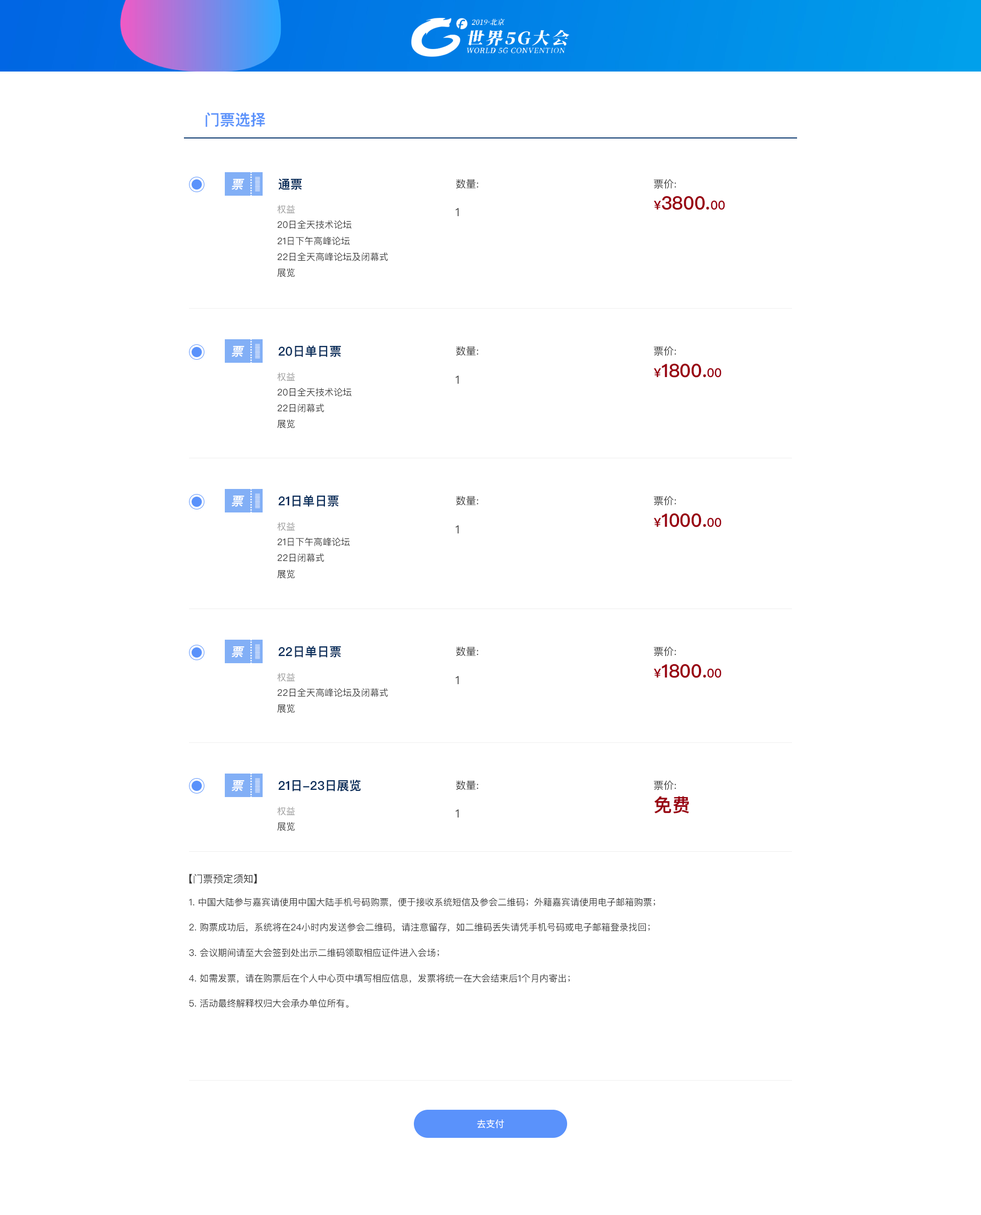
<style>
.page{position:relative;width:981px;height:1215px;background:#ffffff}
.page>*{position:absolute;margin:0}
.t1{font:15.3px "PingFangSC-Semibold";color:#5a92fb;text-transform:uppercase}
.t2{font:12.3px "PingFangSC-Semibold";color:#ffffff;text-transform:uppercase;font-style:italic}
.t3{font:4.7px/9.4px "PingFangSC-Regular";text-transform:uppercase;scale:0.97 1}
.t4{font:12.3px "PingFangSC-Semibold";color:#0a2e5b;text-transform:uppercase}
.t5{font:10.2px "PingFangSC-Regular";color:#333333;text-transform:uppercase}
.t6{font:18.4px "PingFangSC-Semibold";color:#990010;text-transform:uppercase}
.t7{font:12.2px "PingFangSC-Semibold";color:#990010;text-transform:uppercase}
.t8{font:12.3px "PingFangSC-Semibold";color:#990010;text-transform:uppercase}
.t9{font:9.2px "PingFangSC-Regular";color:#999999;text-transform:uppercase}
.t10{font:11.2px "PingFangSC-Regular";color:#333333;text-transform:uppercase}
.t11{font:9.2px/16px "PingFangSC-Regular";color:#333333;text-transform:uppercase}
.t12{font:11.3px "PingFangSC-Regular";color:#333333;text-transform:uppercase}
.t13{font:9.2px "PingFangSC-Regular";color:#333333;text-transform:uppercase}
.t14{font:9.2px/25.4px "PingFangSC-Regular";color:#333333;text-transform:uppercase}
.t15{font:9.2px "PingFangSC-Regular";color:#ffffff}
</style>
<div class="page">
<p class="t1" style="left:205px;top:112px;width:60px;height:15px">门票选择</p>
<p class="t2" style="left:232px;top:179px;width:12px;height:11px">票</p>
<p class="t3" style="left:255px;top:177px;width:5px;height:15px">||||||||||||||||</p>
<p class="t4" style="left:279px;top:178px;width:23px;height:12px">通票</p>
<p class="t5" style="left:456px;top:179px;width:22px;height:10px">数量:</p>
<p class="t5" style="left:654px;top:179px;width:22px;height:10px">票价:</p>
<p class="t6" style="left:654px;top:196px;width:71px;height:14px"><span class="t7">¥</span>3800.<span class="t8">00</span></p>
<p class="t9" style="left:277px;top:205px;width:18px;height:9px">权益</p>
<p class="t10" style="left:455px;top:208px;width:4px;height:8px">1</p>
<p class="t11" style="left:277px;top:220px;width:111px;height:57px">20日全天技术论坛<br>21日下午高峰论坛<br>22日全天高峰论坛及闭幕式<br>展览</p>
<p class="t2" style="left:232px;top:346px;width:12px;height:11px">票</p>
<p class="t3" style="left:255px;top:344px;width:5px;height:15px">||||||||||||||||</p>
<p class="t4" style="left:279px;top:345px;width:62px;height:12px">20日单日票</p>
<p class="t5" style="left:456px;top:346px;width:22px;height:10px">数量:</p>
<p class="t5" style="left:654px;top:346px;width:22px;height:10px">票价:</p>
<p class="t6" style="left:654px;top:363px;width:68px;height:15px"><span class="t8">¥</span>1800.<span class="t8">00</span></p>
<p class="t9" style="left:277px;top:373px;width:18px;height:8px">权益</p>
<p class="t12" style="left:455px;top:376px;width:4px;height:8px">1</p>
<p class="t11" style="left:277px;top:388px;width:75px;height:40px">20日全天技术论坛<br>22日闭幕式<br>展览</p>
<p class="t2" style="left:232px;top:496px;width:12px;height:11px">票</p>
<p class="t3" style="left:255px;top:494px;width:5px;height:14px">||||||||||||||||</p>
<p class="t4" style="left:279px;top:495px;width:60px;height:12px">21日单日票</p>
<p class="t5" style="left:456px;top:496px;width:22px;height:9px">数量:</p>
<p class="t5" style="left:654px;top:496px;width:22px;height:9px">票价:</p>
<p class="t6" style="left:654px;top:513px;width:68px;height:14px"><span class="t8">¥</span>1000.<span class="t8">00</span></p>
<p class="t9" style="left:277px;top:522px;width:18px;height:9px">权益</p>
<p class="t12" style="left:456px;top:525px;width:3px;height:9px">1</p>
<p class="t11" style="left:277px;top:538px;width:73px;height:41px">21日下午高峰论坛<br>22日闭幕式<br>展览</p>
<p class="t2" style="left:232px;top:646px;width:12px;height:12px">票</p>
<p class="t3" style="left:255px;top:644px;width:5px;height:15px">||||||||||||||||</p>
<p class="t4" style="left:279px;top:646px;width:62px;height:12px">22日单日票</p>
<p class="t5" style="left:456px;top:646px;width:22px;height:10px">数量:</p>
<p class="t5" style="left:654px;top:646px;width:22px;height:10px">票价:</p>
<p class="t6" style="left:654px;top:664px;width:68px;height:14px"><span class="t8">¥</span>1800.<span class="t8">00</span></p>
<p class="t9" style="left:277px;top:673px;width:18px;height:9px">权益</p>
<p class="t12" style="left:456px;top:676px;width:3px;height:8px">1</p>
<p class="t11" style="left:277px;top:688px;width:111px;height:25px">22日全天高峰论坛及闭幕式<br>展览</p>
<p class="t2" style="left:232px;top:780px;width:12px;height:12px">票</p>
<p class="t3" style="left:255px;top:778px;width:5px;height:15px">||||||||||||||||</p>
<p class="t4" style="left:279px;top:780px;width:82px;height:12px">21日-23日展览</p>
<p class="t5" style="left:456px;top:780px;width:22px;height:10px">数量:</p>
<p class="t5" style="left:654px;top:780px;width:22px;height:10px">票价:</p>
<p class="t6" style="left:654px;top:796px;width:35px;height:18px">免费</p>
<p class="t9" style="left:277px;top:807px;width:18px;height:9px">权益</p>
<p class="t10" style="left:455px;top:809px;width:4px;height:9px">1</p>
<p class="t13" style="left:277px;top:822px;width:18px;height:9px">展览</p>
<p class="t5" style="left:189px;top:874px;width:68px;height:10px">【门票预定须知】</p>
<p class="t14" style="left:189px;top:898px;width:466px;height:110px">1. 中国大陆参与嘉宾请使用中国大陆手机号码购票，便于接收系统短信及参会二维码；外籍嘉宾请使用电子邮箱购票；<br>2. 购票成功后，系统将在24小时内发送参会二维码，请注意留存，如二维码丢失请凭手机号码或电子邮箱登录找回；<br>3. 会议期间请至大会签到处出示二维码领取相应证件进入会场；<br>4. 如需发票，请在购票后在个人中心页中填写相应信息，发票将统一在大会结束后1个月内寄出；<br>5. 活动最终解释权归大会承办单位所有。</p>
<p class="t15" style="left:477px;top:1120px;width:27px;height:8px">去支付</p>
</div>
